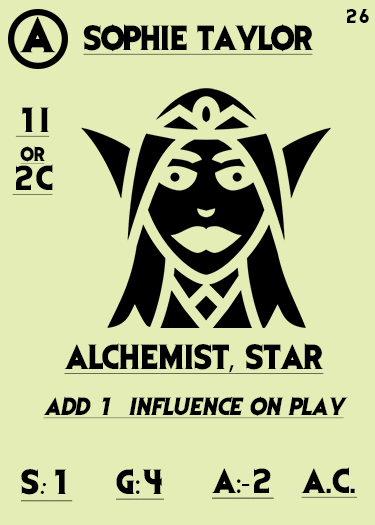
<style>
.page{position:relative;width:375px;height:525px;background:#e3edb5}
.page>*{position:absolute;margin:0}
.t1{font:41.7px "EvilDead";letter-spacing:-0.05em;color:#000000}
.t2{font:16.7px "EvilDead";letter-spacing:-0.05em;color:#000000}
.t3{font:29.2px "EvilDead";letter-spacing:-0.025em;color:#000000;text-decoration:underline}
.t4{font:29.2px/29.2px "EvilDead";color:#000000;text-decoration:underline}
.t5{font:16.7px/29.2px "EvilDead";color:#000000;text-decoration:underline}
.t6{font:29.2px "EvilDead";color:#000000;text-decoration:underline}
.t7{font:29.2px "MyriadPro-Regular";color:#000000;text-decoration:underline}
.t8{font:20.8px "EvilDead";color:#000000;font-style:italic;text-decoration:underline}
.t9{font:29.2px "Fadli-Script";color:#000000;text-decoration:underline}
</style>
<div class="page">
<p class="t1" style="left:19px;top:16px;width:37px;height:37px">A</p>
<p class="t2" style="left:347px;top:9px;width:22px;height:14px">26</p>
<p class="t3" style="left:83px;top:24px;width:231px;height:31px">SOPHIE TAYLOR</p>
<p class="t4" style="left:12px;top:107px;width:41px;height:88px;text-align:center">1I<br><span class="t5">or<br></span>2C</p>
<p class="t6" style="left:64px;top:343px;width:260px;height:31px">ALCHEMIST<span class="t7">,</span> STAR</p>
<p class="t8" style="left:43px;top:396px;width:305px;height:23px">Add 1  influence on play</p>
<p class="t6" style="left:21px;top:469px;width:52px;height:33px">S<span class="t9">:</span>1</p>
<p class="t6" style="left:116px;top:468px;width:49px;height:32px">G<span class="t7">:</span>4</p>
<p class="t7" style="left:211px;top:468px;width:63px;height:31px"><span class="t6">A</span>:-<span class="t6">2</span></p>
<p class="t6" style="left:301px;top:467px;width:56px;height:31px">A.C.</p>
</div>
